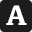
<style>
.page{position:relative;width:32px;height:32px;background:#1c1c1c}
.page>*{position:absolute;margin:0}
.t1{font:29px "Kefa-Bold";color:#ffffff}
</style>
<div class="page">
<p class="t1" style="left:6px;top:5px;width:21px;height:20px">A</p>
</div>
